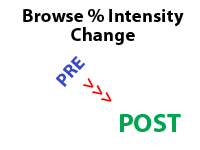
<style>
.page{position:relative;width:200px;height:150px;background:#ffffff}
.page>*{position:absolute;margin:0}
.t1{font:18.7px/18.7px "MyriadPro-Bold";letter-spacing:0.01em;color:#000000}
.t2{font:18.7px "MyriadPro-Bold";letter-spacing:0.01em;color:#3848c5}
.t3{font:18.7px "MyriadPro-Bold";letter-spacing:0.01em;color:#fb0303}
.t4{font:25.9px "MyriadPro-Bold";letter-spacing:0.01em;color:#00a451}
</style>
<div class="page">
<p class="t1" style="left:23px;top:9px;width:161px;height:36px;text-align:center">Browse % Intensity<br>Change</p>
<p class="t2" style="left:55px;top:55px;width:31px;height:32px;rotate:-47deg">PRE</p>
<p class="t3" style="left:82px;top:77px;width:30px;height:25px;rotate:37deg">&gt;&gt;&gt;</p>
<p class="t4" style="left:120px;top:114px;width:61px;height:18px">POST</p>
</div>
